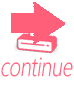
<style>
.page{position:relative;width:74px;height:86px;background:#ffffff}
.page>*{position:absolute;margin:0}
.t1{font:26.3px "SegoeUI-Light";color:#ff5e79;font-style:italic;scale:0.76 1}
</style>
<div class="page">
<p class="t1" style="left:1px;top:57px;width:72px;height:20px">continue</p>
</div>
